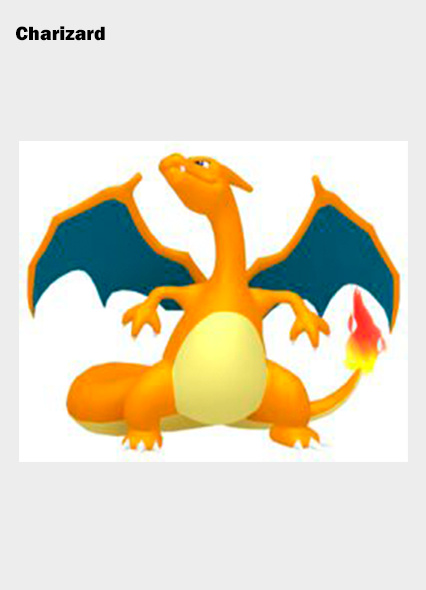
<style>
.page{position:relative;width:426px;height:590px;background:#ededed}
.page>*{position:absolute;margin:0}
.t1{font:20px "FranklinGothic-Heavy";color:#000000}
</style>
<div class="page">
<p class="t1" style="left:16px;top:26px;width:89px;height:15px">Charizard</p>
</div>
